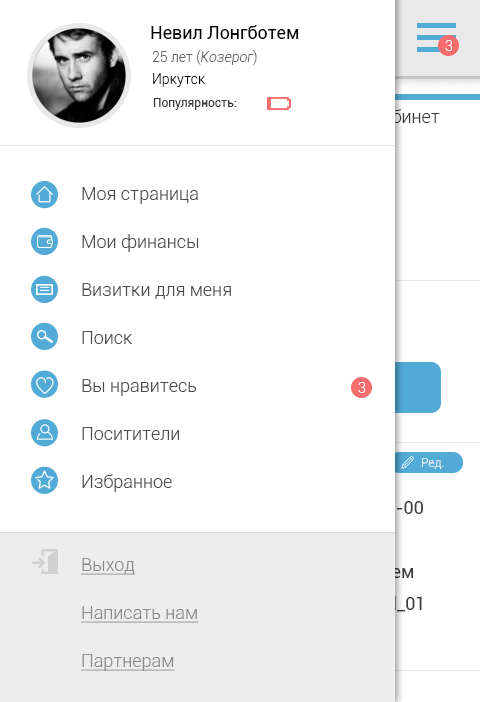
<style>
.page{position:relative;width:480px;height:702px;background:#ffffff}
.page>*{position:absolute;margin:0}
.t1{font:18px "Roboto-Regular";color:#000000}
.t2{font:14px "Roboto-Light";color:#ffffff}
.t3{font:14px "Roboto-Light";color:#636363}
.t4{font:14px "Roboto-LightItalic";color:#636363}
.t5{font:14px "Roboto-Light";color:#000000}
.t6{font:12px "Roboto-Regular";color:#393939}
.t7{font:18px "Roboto-Light"}
.t8{font:18px/48px "Roboto-Light";color:#4c4c4c}
.t9{font:12px "Roboto-Light";color:#ffffff}
.t10{font:18px/48px "Roboto-Light";color:#898989;text-decoration:underline}
</style>
<div class="page">
<p class="t1" style="left:151px;top:25px;width:148px;height:14px">Невил Лонгботем</p>
<p class="t2" style="left:445px;top:40px;width:8px;height:11px">3</p>
<p class="t3" style="left:152px;top:50px;width:105px;height:15px">25 лет (<span class="t4">Козерог</span>)</p>
<p class="t5" style="left:153px;top:73px;width:52px;height:14px">Иркутск</p>
<p class="t6" style="left:153px;top:98px;width:83px;height:12px">Популярность:</p>
<p class="t7" style="left:302px;top:109px;width:138px;height:14px">Личный кабинет</p>
<p class="t8" style="left:82px;top:187px;width:149px;height:305px">Моя страница<br>Мои финансы<br>Визитки для меня<br>Поиск<br>Вы нравитесь<br>Поситители<br>Избранное</p>
<p class="t2" style="left:358px;top:382px;width:8px;height:11px">3</p>
<p class="t9" style="left:422px;top:458px;width:22px;height:11px">Ред.</p>
<p class="t10" style="left:81px;top:558px;width:118px;height:113px">Выход<br>Написать нам<br>Партнерам</p>
</div>
